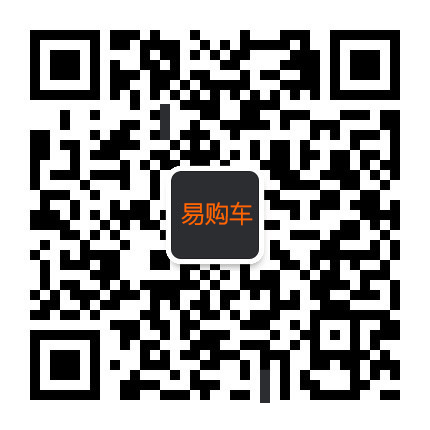
<style>
.page{position:relative;width:430px;height:430px;background:#ffffff}
.page>*{position:absolute;margin:0}
.t1{font:24px "MicrosoftYaHei";color:#ff6600}
</style>
<div class="page">
<p class="t1" style="left:181px;top:201px;width:72px;height:25px">易购车</p>
</div>
